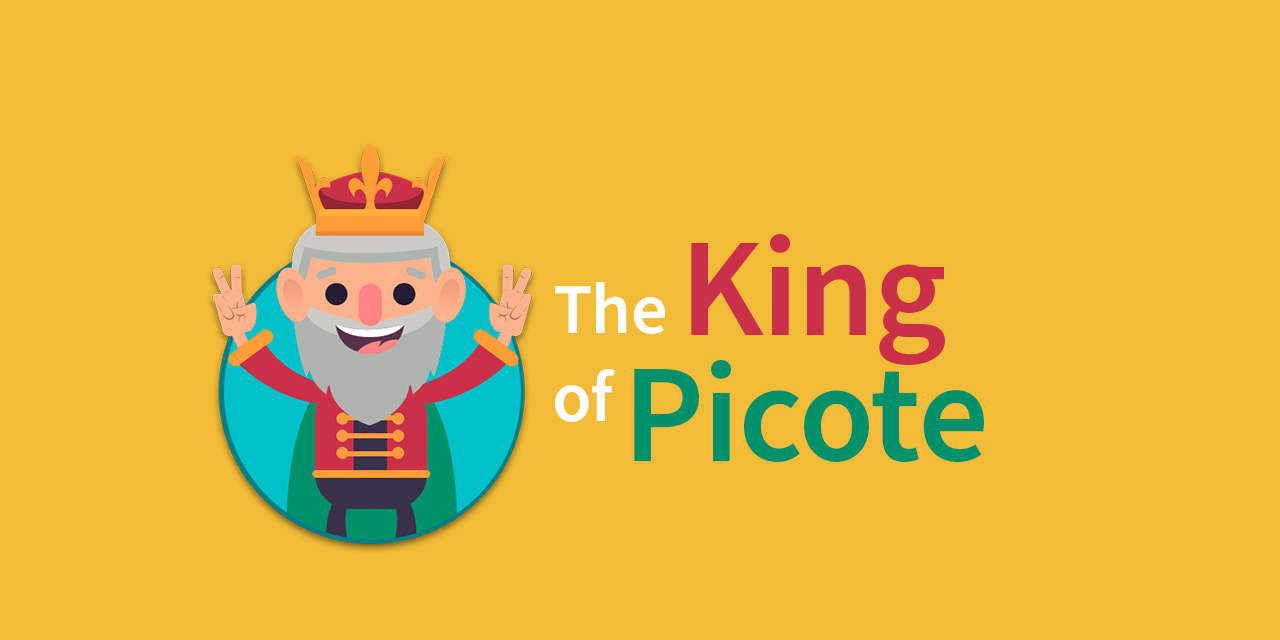
<style>
.page{position:relative;width:1280px;height:640px;background:#f2bb38}
.page>*{position:absolute;margin:0}
.t1{font:140px "SourceSansPro-Semibold";letter-spacing:-0.01em;color:#ca3148}
.t2{font:72px "SourceSansPro-Semibold";letter-spacing:-0.01em;color:#ffffff}
.t3{font:140px "SourceSansPro-Semibold";letter-spacing:-0.01em;color:#00916a}
</style>
<div class="page">
<p class="t1" style="left:691px;top:234px;width:254px;height:131px">King</p>
<p class="t2" style="left:555px;top:282px;width:110px;height:52px">The</p>
<p class="t3" style="left:634px;top:360px;width:350px;height:103px">Picote</p>
<p class="t2" style="left:555px;top:369px;width:60px;height:53px">of</p>
</div>
